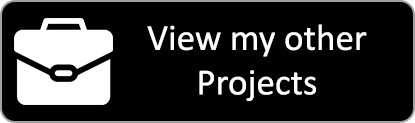
<style>
.page{position:relative;width:415px;height:123px;background:#000000}
.page>*{position:absolute;margin:0}
.t1{font:37.1px "Calibri";color:#ffffff}
</style>
<div class="page">
<p class="t1" style="left:147px;top:24px;width:220px;height:77px;text-align:center">View my other<br>Projects</p>
</div>
